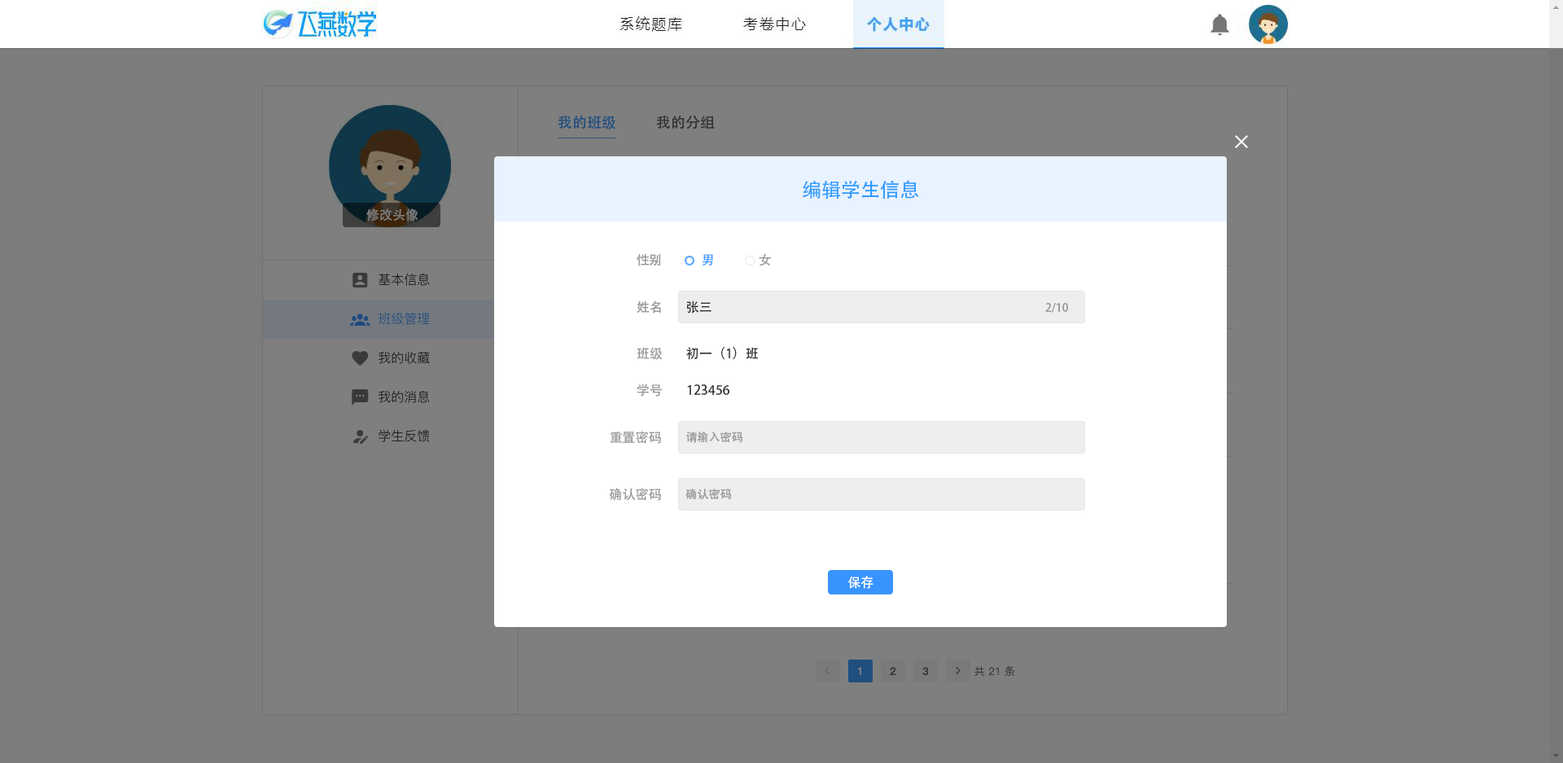
<style>
.page{position:relative;width:1563px;height:763px;background:#7d7d7d}
.page>*{position:absolute;margin:0}
.t1{font:14.7px "AdobeHeitiStd-Regular";color:#204f7f}
.t2{font:14.7px "AdobeHeitiStd-Regular";color:#333333}
.t3{font:19.5px "AdobeHeitiStd-Regular";color:#339dff}
.t4{font:13px "AdobeHeitiStd-Regular";color:#7f7f7f}
.t5{font:13px "AdobeHeitiStd-Regular";color:#999999}
.t6{font:13px "AdobeHeitiStd-Regular";color:#409eff}
.t7{font:13px "AdobeHeitiStd-Regular";color:#333333}
.t8{font:11.4px "AdobeHeitiStd-Regular";color:#999999}
.t9{font:13px "AdobeHeitiStd-Regular";color:#ffffff}
</style>
<div class="page">
<p class="t1" style="left:558px;top:115px;width:57px;height:14px">我的班级</p>
<p class="t2" style="left:656px;top:115px;width:59px;height:14px">我的分组</p>
<p class="t3" style="left:803px;top:180px;width:116px;height:19px">编辑学生信息</p>
<p class="t4" style="left:366px;top:208px;width:52px;height:13px">修改头像</p>
<p class="t5" style="left:637px;top:253px;width:24px;height:13px">性别</p>
<p class="t6" style="left:702px;top:254px;width:11px;height:11px">男</p>
<p class="t5" style="left:759px;top:253px;width:12px;height:13px">女</p>
<p class="t5" style="left:637px;top:300px;width:24px;height:13px">姓名</p>
<p class="t7" style="left:686px;top:300px;width:26px;height:13px">张三</p>
<p class="t8" style="left:1045px;top:303px;width:23px;height:10px">2/10</p>
<p class="t5" style="left:637px;top:347px;width:26px;height:13px">班级</p>
<p class="t7" style="left:686px;top:347px;width:72px;height:13px">初一（1）班</p>
<p class="t5" style="left:637px;top:383px;width:25px;height:13px">学号</p>
<p class="t7" style="left:687px;top:384px;width:43px;height:11px">123456</p>
<p class="t5" style="left:610px;top:431px;width:51px;height:13px">重置密码</p>
<p class="t8" style="left:686px;top:431px;width:56px;height:12px">请输入密码</p>
<p class="t5" style="left:609px;top:488px;width:52px;height:13px">确认密码</p>
<p class="t8" style="left:686px;top:488px;width:45px;height:12px">确认密码</p>
<p class="t9" style="left:848px;top:576px;width:26px;height:13px">保存</p>
</div>
